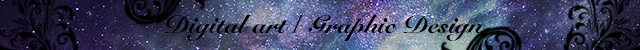
<style>
.page{position:relative;width:640px;height:50px}
.page>*{position:absolute;margin:0}
.t1{font:25px "SnellRoundhand-Black";color:#000000}
</style>
<div class="page">
<p class="t1" style="left:164px;top:13px;width:322px;height:28px">Digital art / Graphic Design</p>
</div>
